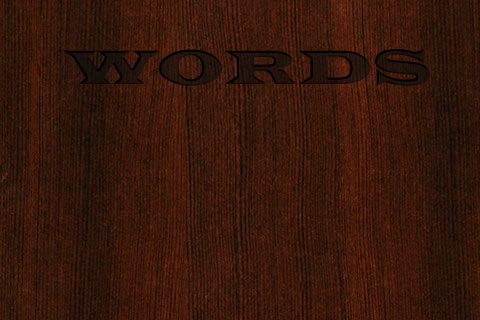
<style>
.page{position:relative;width:480px;height:320px}
.page>*{position:absolute;margin:0}
.t1{font:50px "LatinWide";color:#1d100a}
</style>
<div class="page">
<p class="t1" style="left:63px;top:49px;width:367px;height:37px">WORDS</p>
</div>
